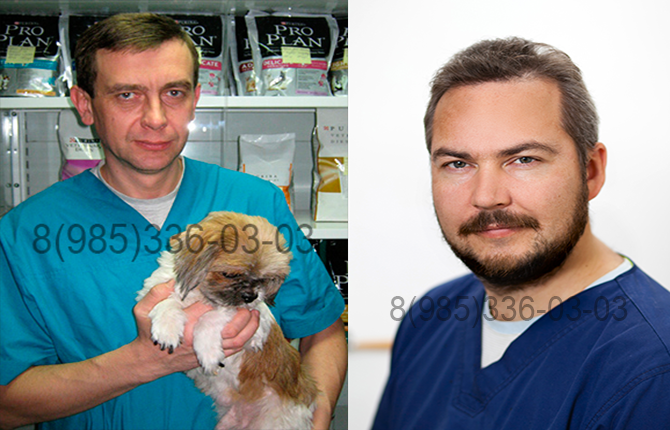
<style>
.page{position:relative;width:670px;height:430px}
.page>*{position:absolute;margin:0}
.t1{font:34.8px "ArialNarrow";letter-spacing:0.002em;scale:1.12 1}
</style>
<div class="page">
<p class="t1" style="left:390px;top:296px;width:238px;height:32px">8(985)336-03-03</p>
</div>
